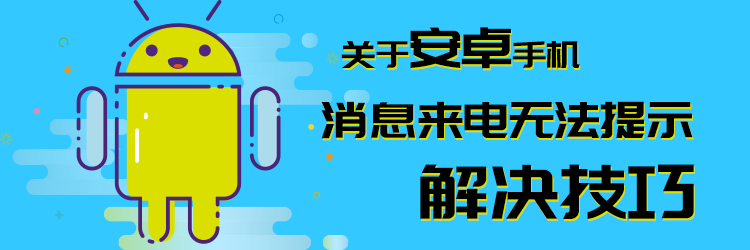
<style>
.page{position:relative;width:750px;height:250px;background:#33c8ff}
.page>*{position:absolute;margin:0}
.t1{font:37.5px "PangMenZhengDao";letter-spacing:-0.01em;color:#000000}
.t2{font:56.2px "PangMenZhengDao";letter-spacing:-0.01em;color:#000000}
.t3{font:37.5px "PangMenZhengDao";letter-spacing:-0.01em}
.t4{font:56.2px "PangMenZhengDao";letter-spacing:-0.01em}
.t5{font:50px "PangMenZhengDao";letter-spacing:-0.01em;color:#000000}
.t6{font:50px "PangMenZhengDao";letter-spacing:-0.01em}
.t7{font:75px "PangMenZhengDao";letter-spacing:-0.01em;color:#000000}
</style>
<div class="page">
<p class="t1" style="left:341px;top:27px;width:239px;height:42px">关于<span class="t2">安卓</span>手机</p>
<p class="t3" style="left:342px;top:29px;width:239px;height:42px">关于<span class="t4">安卓</span>手机</p>
<p class="t5" style="left:321px;top:101px;width:372px;height:38px">消息来电无法提示</p>
<p class="t6" style="left:322px;top:103px;width:372px;height:38px">消息来电无法提示</p>
<p class="t7" style="left:420px;top:164px;width:274px;height:55px">解决技巧</p>
<p class="t7" style="left:421px;top:166px;width:274px;height:55px">解决技巧</p>
</div>
